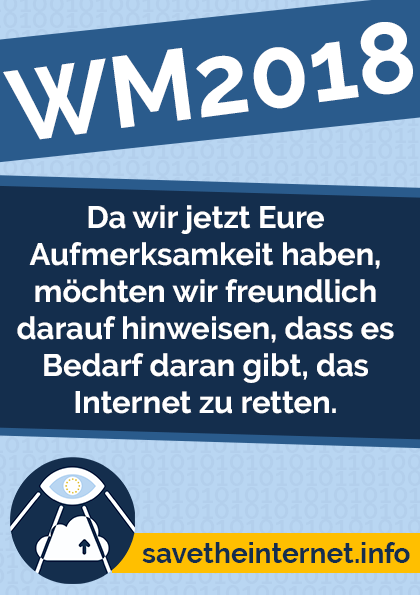
<style>
.page{position:relative;width:420px;height:595px;background:#142e4d}
.page>*{position:absolute;margin:0}
.t1{font:100.8px "Raleway-Bold";color:#ffffff}
.t2{font:30.9px "Raleway-Bold";color:#ffffff}
.t3{font:28px "Raleway-Bold";color:#142e4d}
</style>
<div class="page">
<p class="t1" style="left:3px;top:22px;width:410px;height:118px;rotate:-8deg">WM2018</p>
<p class="t2" style="left:17px;top:205px;width:377px;height:209px;text-align:center">Da wir jetzt Eure <br>Aufmerksamkeit haben,<br>möchten wir freundlich <br>darauf hinweisen, dass es Bedarf daran gibt, das <br>Internet zu retten.</p>
<p class="t3" style="left:142px;top:542px;width:268px;height:21px">savetheinternet.info</p>
</div>
